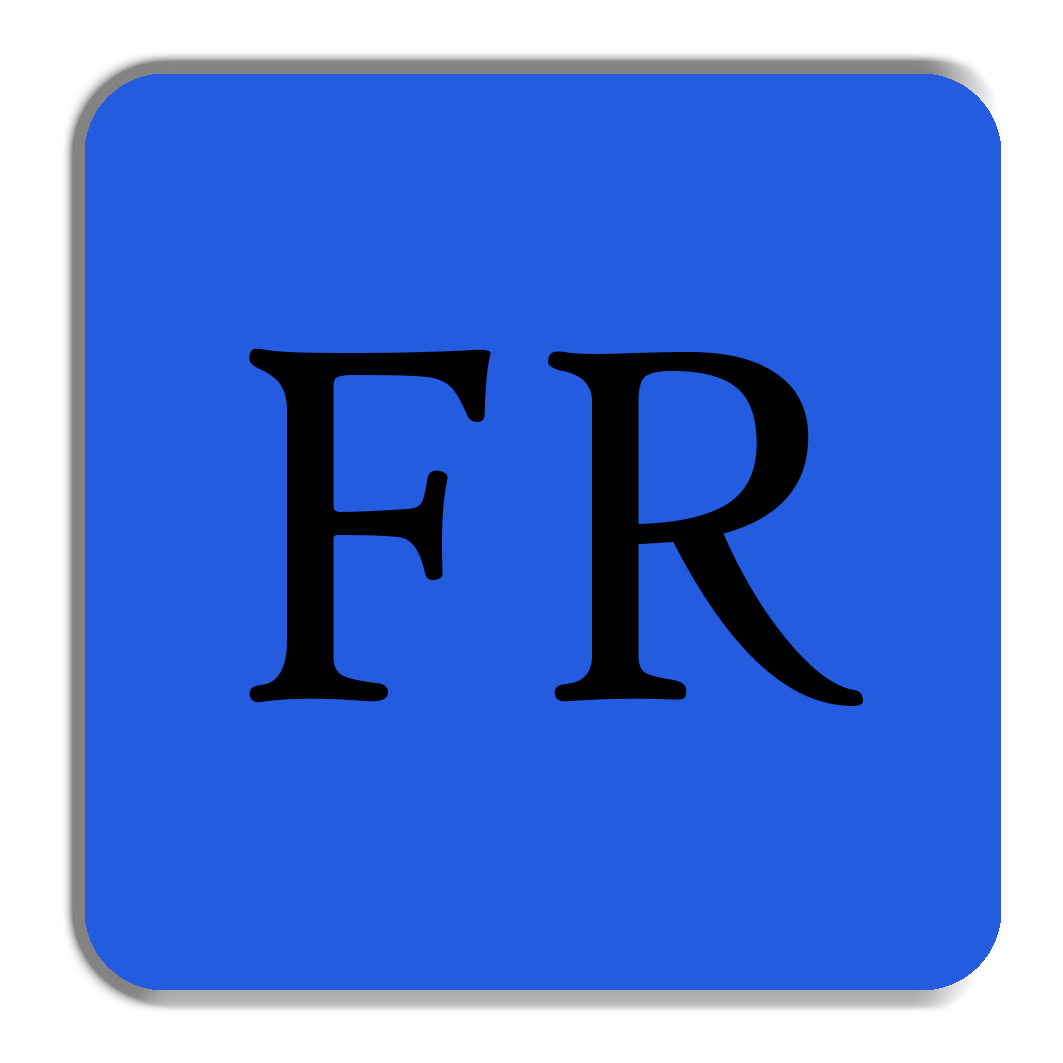
<style>
.page{position:relative;width:1063px;height:1063px;background:#235cde}
.page>*{position:absolute;margin:0}
.t1{font:541.7px "HighTowerText-Reg";color:#000000}
</style>
<div class="page">
<p class="t1" style="left:249px;top:348px;width:615px;height:358px">FR</p>
</div>
